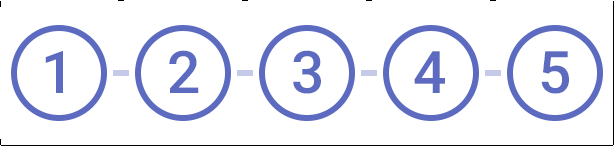
<style>
.page{position:relative;width:614px;height:146px;background:#ffffff}
.page>*{position:absolute;margin:0}
.t1{font:58.8px "Roboto2DRAFT-Medium";color:#5c6bc0}
</style>
<div class="page">
<p class="t1" style="left:45px;top:51px;width:18px;height:42px">1</p>
<p class="t1" style="left:169px;top:50px;width:30px;height:43px">2</p>
<p class="t1" style="left:293px;top:50px;width:28px;height:44px">3</p>
<p class="t1" style="left:414px;top:51px;width:31px;height:42px">4</p>
<p class="t1" style="left:541px;top:51px;width:28px;height:43px">5</p>
</div>
